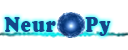
<style>
.page{position:relative;width:128px;height:50px;background:#ffffff}
.page>*{position:absolute;margin:0}
.t1{font:22.2px "CooperBlack";letter-spacing:0.05em;color:#164689;scale:0.86 1}
</style>
<div class="page">
<p class="t1" style="left:4px;top:17px;width:52px;height:15px">Neur</p>
<p class="t1" style="left:85px;top:17px;width:26px;height:19px">Py</p>
</div>
